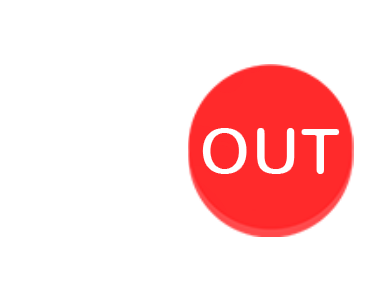
<style>
.page{position:relative;width:370px;height:300px;background:#ffffff}
.page>*{position:absolute;margin:0}
.t1{font:65.2px "ArialRoundedMTBold";color:#ffffff}
</style>
<div class="page">
<p class="t1" style="left:201px;top:127px;width:140px;height:48px">OUT</p>
</div>
